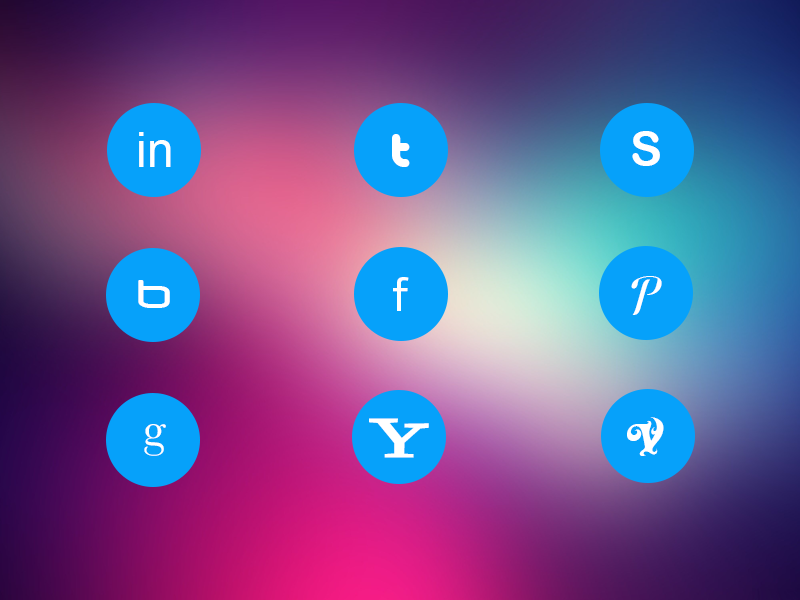
<style>
.page{position:relative;width:800px;height:600px}
.page>*{position:absolute;margin:0}
.t1{font:48px "ArialMT";color:#ffffff}
.t2{font:48px "PicoBlack";color:#ffffff}
.t3{font:48px "ArialRoundedMTBold";color:#ffffff}
.t4{font:48px "Neuropol";color:#ffffff}
.t5{font:48px "Klavika-Regular";color:#ffffff}
.t6{font:48px "DanubiaScript";color:#ffffff}
.t7{font:48px "Baskerville";color:#ffffff}
.t8{font:48px "Yahoo";color:#ffffff}
.t9{font:48px "BlackRose";color:#ffffff}
</style>
<div class="page">
<p class="t1" style="left:139px;top:132px;width:32px;height:35px">in</p>
<p class="t2" style="left:392px;top:134px;width:18px;height:33px">t</p>
<p class="t3" style="left:632px;top:131px;width:28px;height:35px">S</p>
<p class="t4" style="left:138px;top:280px;width:32px;height:28px">b</p>
<p class="t5" style="left:393px;top:277px;width:16px;height:34px">f</p>
<p class="t6" style="left:631px;top:276px;width:31px;height:39px">P</p>
<p class="t7" style="left:144px;top:424px;width:22px;height:32px">g</p>
<p class="t8" style="left:369px;top:418px;width:60px;height:40px">Y</p>
<p class="t9" style="left:627px;top:417px;width:37px;height:39px">V</p>
</div>
